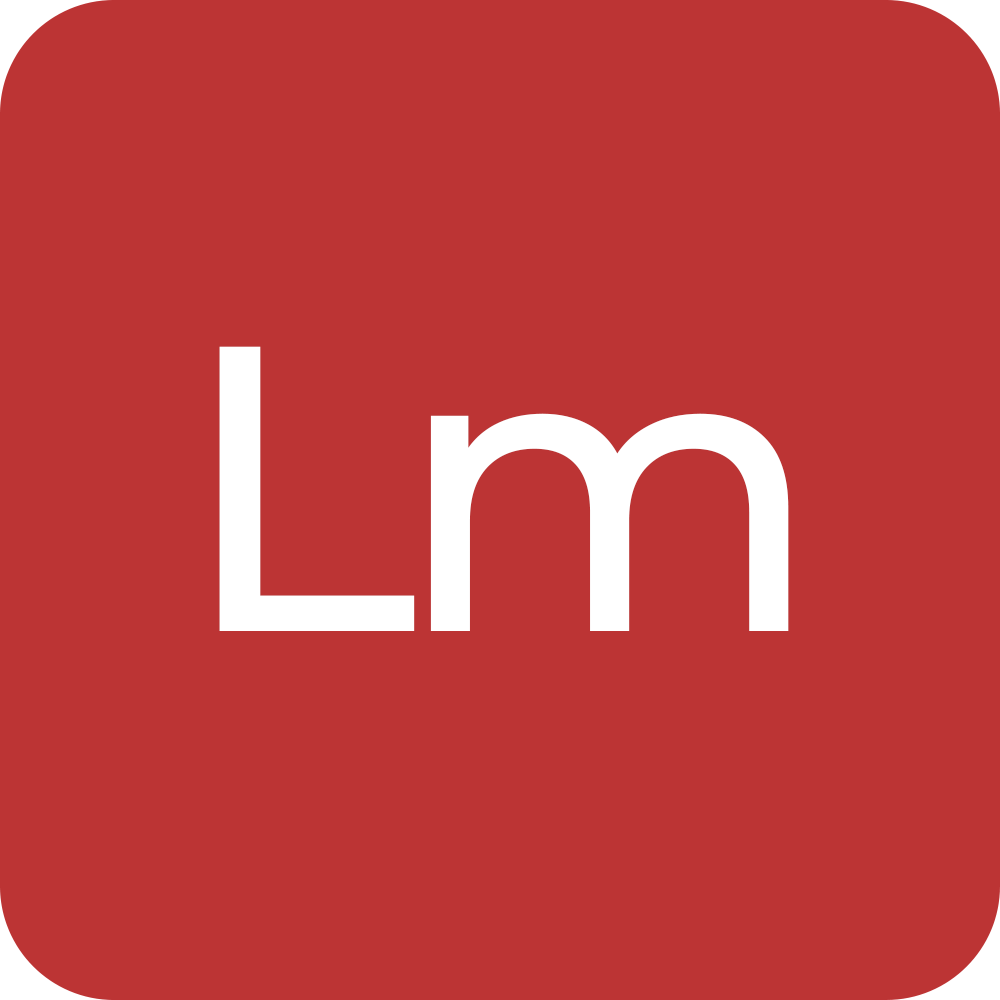
<style>
.page{position:relative;width:1000px;height:1000px;background:#bc3434}
.page>*{position:absolute;margin:0}
.t1{font:406px "Montserrat-Medium";letter-spacing:-0.06em;color:#ffffff}
</style>
<div class="page">
<p class="t1" style="left:219px;top:346px;width:570px;height:285px">Lm</p>
</div>
